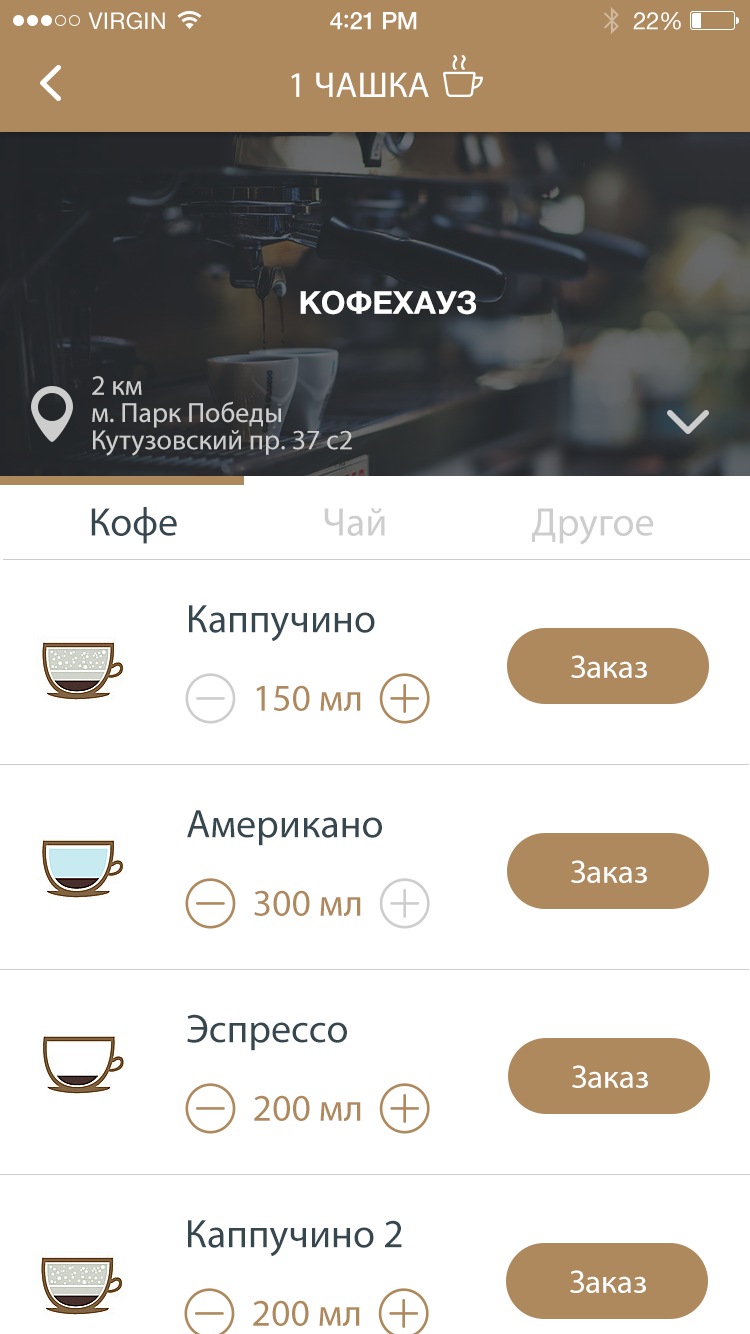
<style>
.page{position:relative;width:750px;height:1334px;background:#ffffff}
.page>*{position:absolute;margin:0}
.t1{font:23px "HelveticaNeue";letter-spacing:0.02em;color:#ffffff}
.t2{font:24px "HelveticaNeue-Medium";letter-spacing:-0.02em;color:#ffffff}
.t3{font:26px "Avenir-Medium";letter-spacing:-0.02em;color:#ffffff}
.t4{font:24px "HelveticaNeue";letter-spacing:-0.02em;color:#ffffff}
.t5{font:36px "MyriadPro-Regular";color:#ffffff;text-transform:uppercase}
.t6{font:31.7px "HelveticaNeueCyr-Bold";color:#ffffff}
.t7{font:28px/27.2px "MyriadPro-Regular";color:#cdcdcd}
.t8{font:40px "MyriadPro-Regular";color:#cdcdcd}
.t9{font:40px "MyriadPro-Regular";color:#37474f}
.t10{font:32.7px "MyriadPro-Regular";color:#ffffff}
.t11{font:38px "MyriadPro-Regular";color:#ae895d}
</style>
<div class="page">
<p class="t1" style="left:88px;top:12px;width:77px;height:18px">VIRGIN</p>
<p class="t2" style="left:330px;top:12px;width:87px;height:18px">4<span class="t3">:</span>21 PM</p>
<p class="t4" style="left:633px;top:12px;width:48px;height:18px">22%</p>
<p class="t5" style="left:291px;top:72px;width:138px;height:25px">1 чашка</p>
<p class="t6" style="left:300px;top:290px;width:176px;height:25px">КОФЕХАУЗ</p>
<p class="t7" style="left:92px;top:376px;width:260px;height:80px">2 км<br>м. Парк Победы<br>Кутузовский пр. 37 с2</p>
<p class="t8" style="left:91px;top:507px;width:563px;height:38px"><span class="t9">Кофе                 </span>Чай                 Другое</p>
<p class="t9" style="left:189px;top:605px;width:186px;height:37px">Каппучино</p>
<p class="t10" style="left:571px;top:655px;width:76px;height:23px">Заказ</p>
<p class="t11" style="left:256px;top:685px;width:105px;height:26px">150 мл</p>
<p class="t9" style="left:187px;top:810px;width:195px;height:36px">Американо</p>
<p class="t10" style="left:571px;top:860px;width:76px;height:23px">Заказ</p>
<p class="t11" style="left:254px;top:890px;width:107px;height:26px">300 мл</p>
<p class="t9" style="left:187px;top:1014px;width:160px;height:37px">Эспрессо</p>
<p class="t10" style="left:572px;top:1065px;width:76px;height:23px">Заказ</p>
<p class="t11" style="left:254px;top:1095px;width:107px;height:26px">200 мл</p>
<p class="t9" style="left:188px;top:1220px;width:214px;height:37px">Каппучино 2</p>
<p class="t10" style="left:570px;top:1270px;width:76px;height:23px">Заказ</p>
<p class="t11" style="left:253px;top:1300px;width:107px;height:26px">200 мл</p>
</div>
